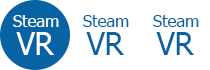
<style>
.page{position:relative;width:210px;height:70px;background:#ffffff}
.page>*{position:absolute;margin:0}
.t1{font:16.7px "Tahoma";color:#ffffff}
.t2{font:16.7px "Tahoma";color:#0763a3}
.t3{font:30.6px "Tahoma";color:#ffffff}
.t4{font:30.6px "Tahoma";color:#0763a3}
</style>
<div class="page">
<p class="t1" style="left:13px;top:15px;width:46px;height:12px">Steam</p>
<p class="t2" style="left:83px;top:15px;width:46px;height:12px">Steam</p>
<p class="t2" style="left:153px;top:15px;width:46px;height:12px">Steam</p>
<p class="t3" style="left:16px;top:32px;width:38px;height:23px">VR</p>
<p class="t4" style="left:86px;top:32px;width:38px;height:23px">VR</p>
<p class="t4" style="left:156px;top:32px;width:38px;height:23px">VR</p>
</div>
